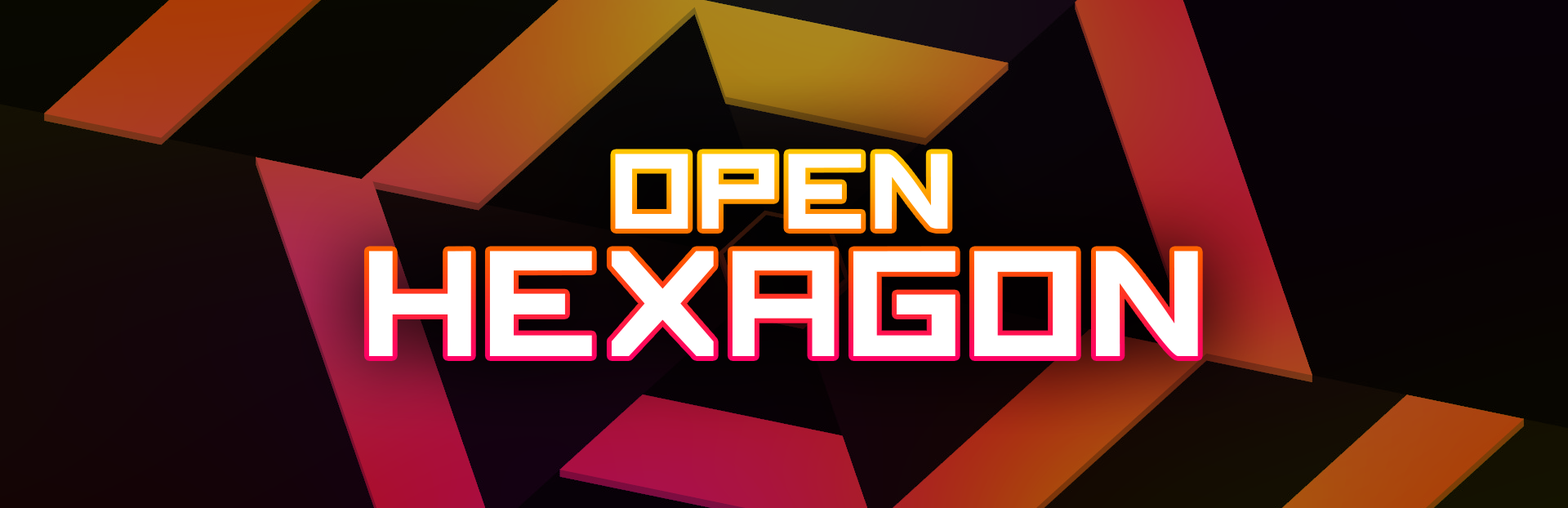
<style>
.page{position:relative;width:1568px;height:508px}
.page>*{position:absolute;margin:0}
.t1{font:163.8px/128px "OpenSquare-Bold";color:#ffffff}
.t2{font:117px/90px "OpenSquare-Bold";color:#ffffff}
</style>
<div class="page">
<p class="t1" style="left:368px;top:154px;width:830px;height:202px;text-align:center"><span class="t2">OPEN<br></span>Hexagon</p>
</div>
